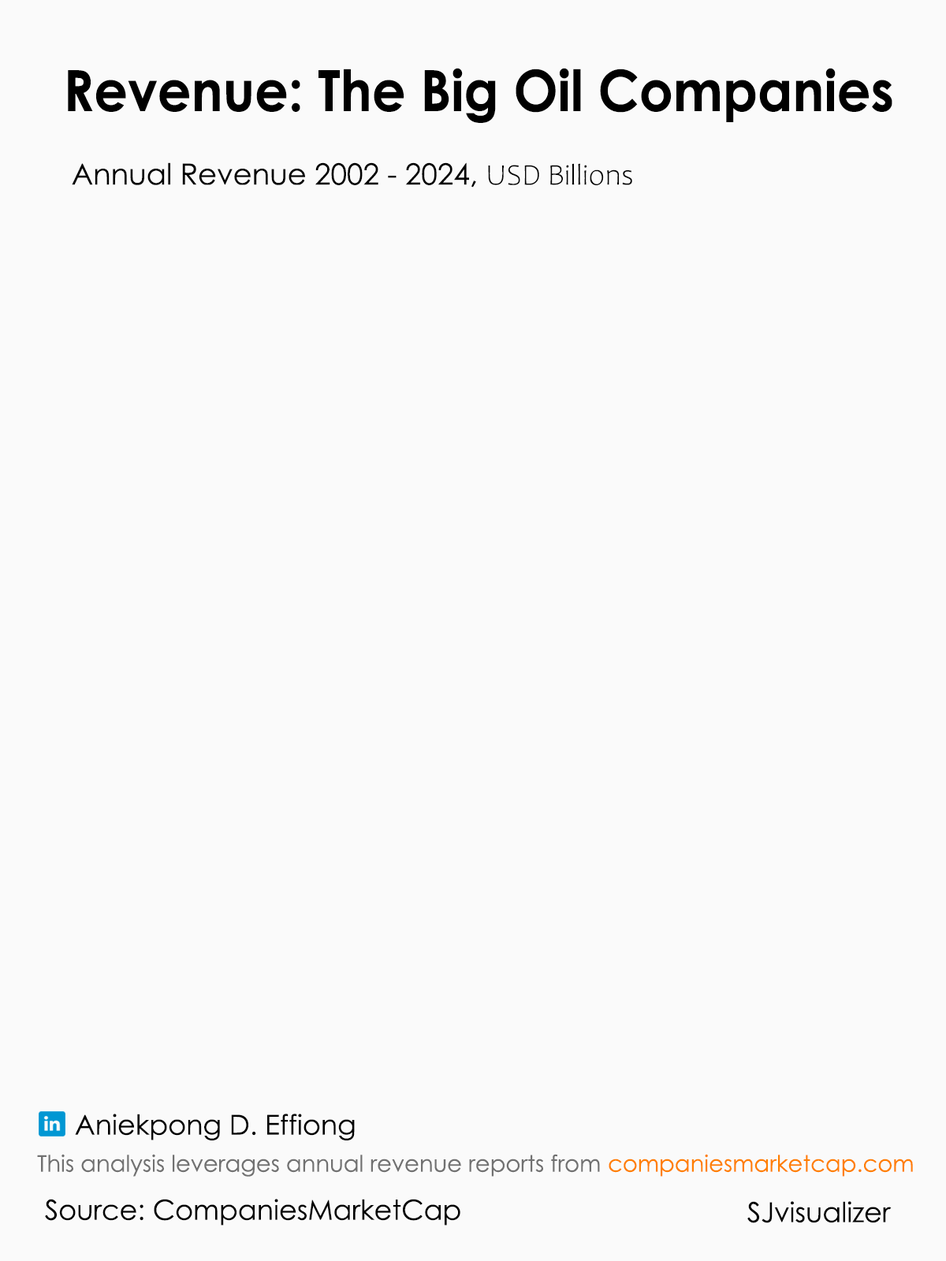
<style>
.page{position:relative;width:946px;height:1261px;background:#fafafa}
.page>*{position:absolute;margin:0}
.t1{font:56.8px "CenturyGothic-Bold";color:#000000;scale:0.93 1}
.t2{font:29.2px "CenturyGothic";color:#000000}
.t3{font:29.9px "Candara-Light";color:#000000}
.t4{font:27.6px "CenturyGothic";color:#000000}
.t5{font:22.9px "CenturyGothic";color:#717171}
.t6{font:22.9px "CenturyGothic";color:#ff7f00}
.t7{font:22.9px "CenturyGothic";color:#000000}
</style>
<div class="page">
<p class="t1" style="left:68px;top:68px;width:824px;height:55px">Revenue: The Big Oil Companies</p>
<p class="t2" style="left:72px;top:162px;width:560px;height:26px">Annual Revenue 2002 - 2024, <span class="t3">USD Billions</span></p>
<p class="t4" style="left:75px;top:1114px;width:280px;height:26px">Aniekpong D. Effiong</p>
<p class="t5" style="left:37px;top:1154px;width:563px;height:23px">This analysis leverages annual revenue reports from</p>
<p class="t6" style="left:608px;top:1154px;width:305px;height:23px"><span class="t7">         </span>companiesmarketcap.com</p>
<p class="t4" style="left:45px;top:1199px;width:415px;height:26px">Source: CompaniesMarketCap</p>
<p class="t4" style="left:747px;top:1201px;width:144px;height:22px">SJvisualizer</p>
</div>
